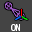
<style>
.page{position:relative;width:32px;height:32px;background:#444444}
.page>*{position:absolute;margin:0}
.t1{font:10px "MyriadPro-Cond";color:#ffffff;scale:1.14 1}
</style>
<div class="page">
<p class="t1" style="left:11px;top:24px;width:9px;height:7px">ON</p>
</div>
